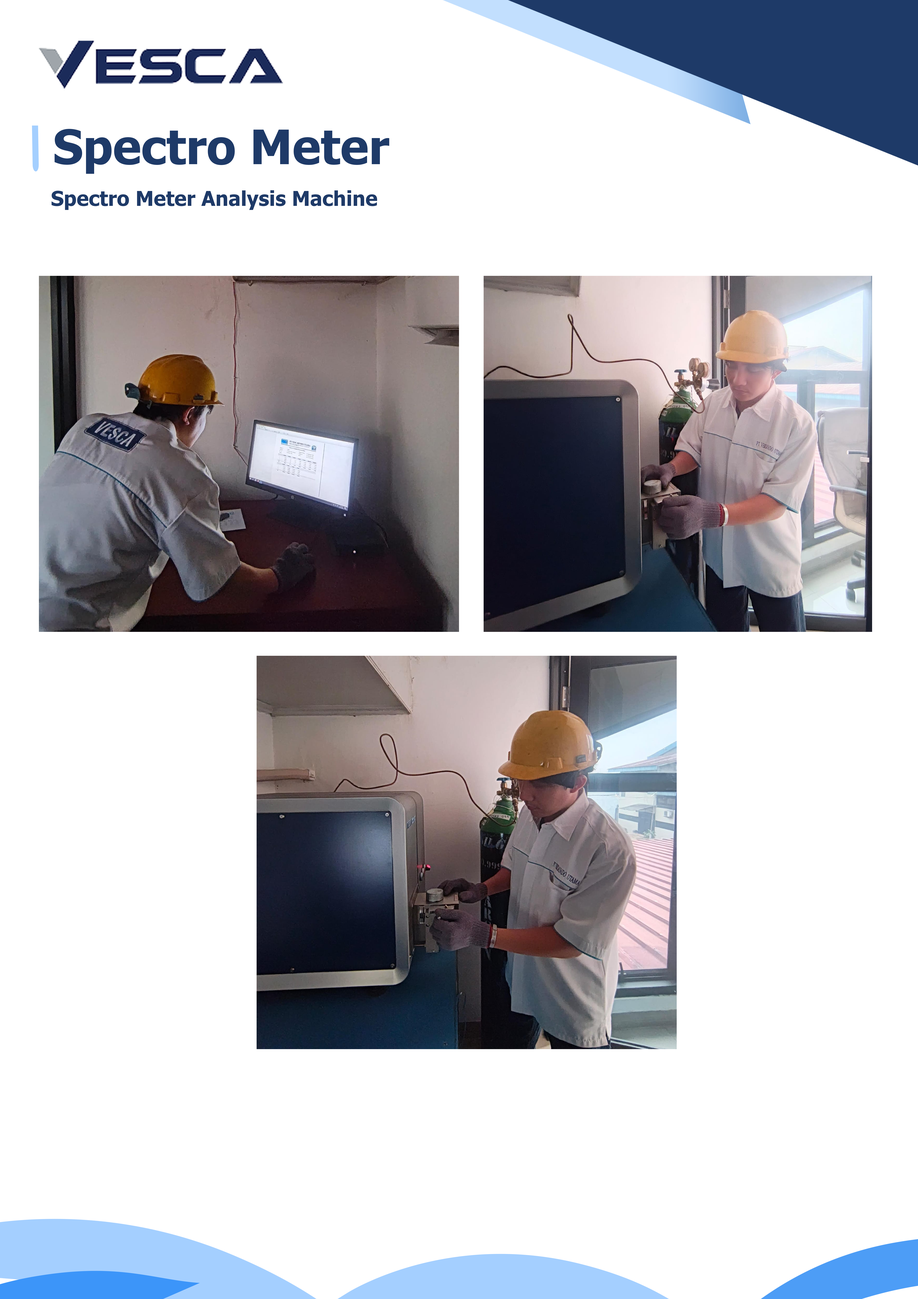
<style>
.page{position:relative;width:918px;height:1299px;background:#ffffff}
.page>*{position:absolute;margin:0}
.t1{font:47.6px "Tahoma-Bold";color:#1e3a68}
.t2{font:20.5px "Tahoma-Bold";color:#1e3a68}
</style>
<div class="page">
<p class="t1" style="left:55px;top:129px;width:334px;height:45px">Spectro Meter</p>
<p class="t2" style="left:51px;top:190px;width:326px;height:20px">Spectro Meter Analysis Machine</p>
</div>
